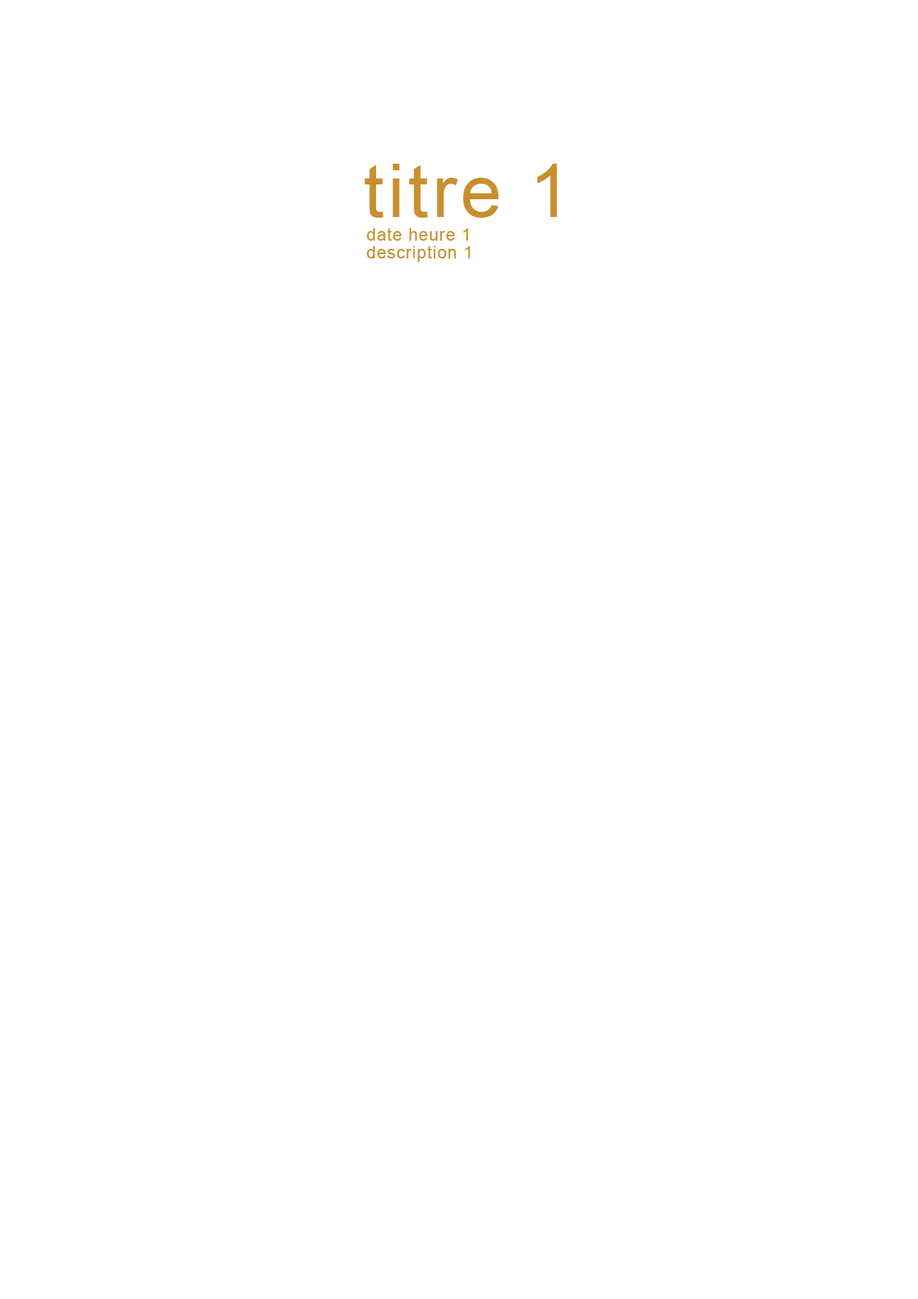
<style>
.page{position:relative;width:918px;height:1299px;background:#ffffff}
.page>*{position:absolute;margin:0}
.t1{font:74px "ArialMT";letter-spacing:0.05em;color:#c98f2f}
.t2{font:17px "ArialMT";letter-spacing:0.05em;color:#c98f2f}
</style>
<div class="page">
<p class="t1" style="left:364px;top:164px;width:194px;height:54px">titre 1</p>
<p class="t2" style="left:367px;top:228px;width:102px;height:13px">date heure 1</p>
<p class="t2" style="left:367px;top:246px;width:103px;height:16px">description 1</p>
</div>
